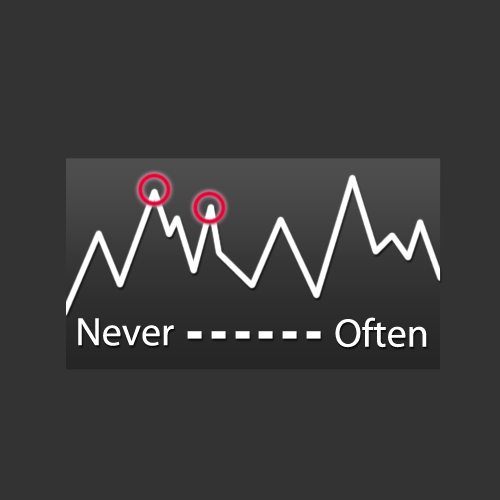
<style>
.page{position:relative;width:500px;height:500px;background:#333333}
.page>*{position:absolute;margin:0}
.t1{font:40px "MyriadPro-Regular";color:#ffffff}
</style>
<div class="page">
<p class="t1" style="left:78px;top:318px;width:96px;height:28px">Never</p>
<p class="t1" style="left:335px;top:317px;width:92px;height:31px">Often</p>
</div>
